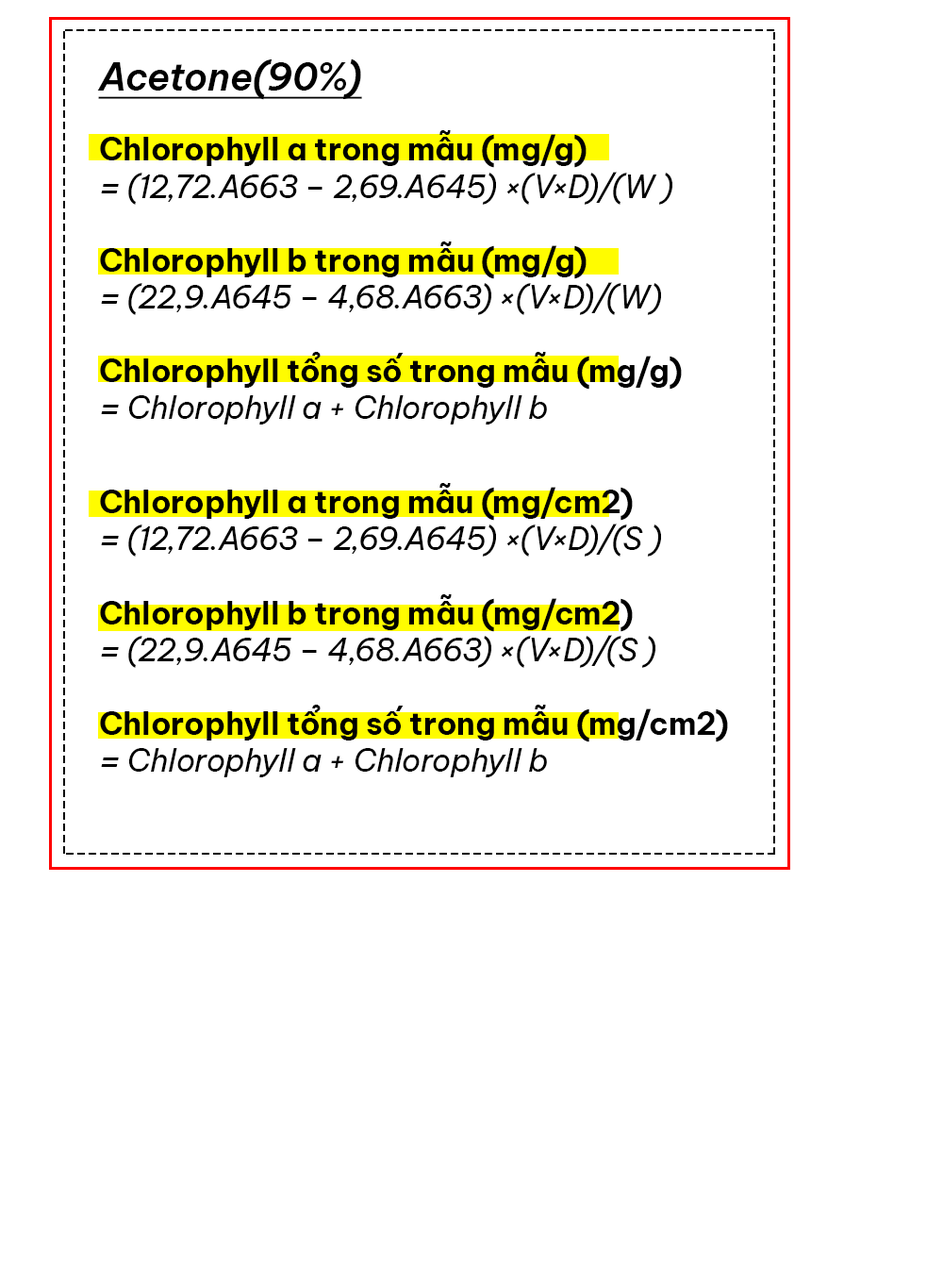
<style>
.page{position:relative;width:943px;height:1265px;background:#ffffff}
.page>*{position:absolute;margin:0}
.t1{font:30.8px "BeVietnamPro-Italic";color:#000000}
.t2{font:37.6px "BeVietnamPro-SemiBoldItalic";color:#000000;text-decoration:underline}
.t3{font:30.8px "BeVietnamPro-Bold";color:#000000}
.t4{font:27.3px "BeVietnamPro-SemiBoldItalic";color:#000000;text-decoration:underline}
</style>
<div class="page">
<p class="t1" style="left:97px;top:58px;width:585px;height:366px"><span class="t2">Acetone(90%)<br><br></span><span class="t3">Chlorophyll a trong mẫu (mg/g) <br></span>= (12,72.A663 – 2,69.A645) ×(V×D)/(W )<br><br><span class="t3">Chlorophyll b trong mẫu (mg/g)<br></span>= (22,9.A645 – 4,68.A663) ×(V×D)/(W)<br><br><span class="t3">Chlorophyll tổng số trong mẫu (mg/g)<br></span>= Chlorophyll a + Chlorophyll b</p>
<p class="t1" style="left:100px;top:483px;width:628px;height:294px"><span class="t4"><br></span><span class="t3">Chlorophyll a trong mẫu (mg/cm2) <br></span>= (12,72.A663 – 2,69.A645) ×(V×D)/(S )<br><br><span class="t3">Chlorophyll b trong mẫu (mg/cm2)<br></span>= (22,9.A645 – 4,68.A663) ×(V×D)/(S )<br><br><span class="t3">Chlorophyll tổng số trong mẫu (mg/cm2)<br></span>= Chlorophyll a + Chlorophyll b</p>
</div>
